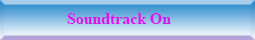
<style>
.page{position:relative;width:255px;height:40px}
.page>*{position:absolute;margin:0}
.t1{font:15.8px "TimesNewRomanPS-BoldMT";color:#d815ed}
</style>
<div class="page">
<p class="t1" style="left:67px;top:13px;width:104px;height:11px">Soundtrack On</p>
</div>
